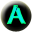
<style>
.page{position:relative;width:32px;height:32px;background:#ffffff}
.page>*{position:absolute;margin:0}
.t1{font:24px "KeltCapsFreehand"}
</style>
<div class="page">
<p class="t1" style="left:7px;top:5px;width:19px;height:19px">A</p>
</div>
